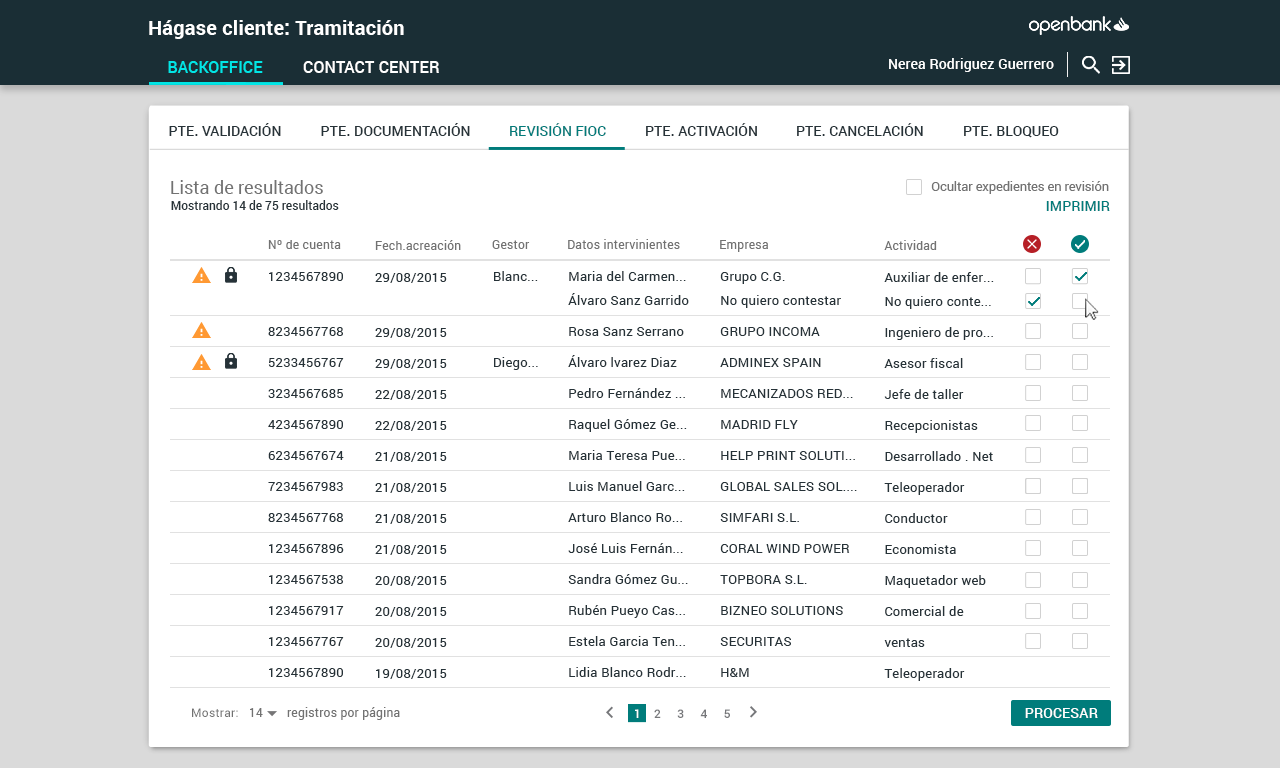
<style>
.page{position:relative;width:1280px;height:768px;background:#ffffff}
.page>*{position:absolute;margin:0}
.t1{font:20px "Roboto-Bold";letter-spacing:0.01em;color:#ffffff}
.t2{font:16px "Roboto-Medium";letter-spacing:0.01em;color:#00e6e6}
.t3{font:16px "Roboto-Medium";letter-spacing:0.01em;color:#ffffff}
.t4{font:14px "Roboto-Medium";letter-spacing:0.01em;color:#ffffff}
.t5{font:14px "Roboto-Medium";letter-spacing:0.01em;color:#263238}
.t6{font:14px "Roboto-Medium";letter-spacing:0.01em;color:#007c7b}
.t7{font:18px "Roboto-Regular";color:#727272}
.t8{font:13px "Roboto-Regular";color:#727272}
.t9{font:12px "Roboto-Medium";color:#263238}
.t10{font:14.2px "Roboto-Medium";letter-spacing:0.01em;color:#007c7b}
.t11{font:12px "Roboto-Regular";letter-spacing:0.02em;color:#727272}
.t12{font:13px/31px "Roboto-Regular";letter-spacing:0.02em;color:#263238}
.t13{font:13px/30.9px "Roboto-Regular";letter-spacing:0.02em;color:#263238}
.t14{font:13px/24px "Roboto-Regular";letter-spacing:0.02em;color:#263238}
.t15{font:13px/23.9px "Roboto-Regular";letter-spacing:0.02em;color:#263238}
.t16{font:12.1px "Roboto-Regular";letter-spacing:0.02em;color:#727272}
.t17{font:12.1px "Roboto-Medium";letter-spacing:0.02em;color:#76777a}
.t18{font:12.1px "Roboto-Medium";letter-spacing:0.02em;color:#ffffff}
</style>
<div class="page">
<p class="t1" style="left:149px;top:20px;width:255px;height:19px">Hágase cliente: Tramitación</p>
<p class="t2" style="left:168px;top:61px;width:95px;height:12px">BACKOFFICE</p>
<p class="t3" style="left:303px;top:61px;width:136px;height:12px">CONTACT CENTER</p>
<p class="t4" style="left:889px;top:58px;width:165px;height:14px">Nerea Rodriguez Guerrero</p>
<p class="t5" style="left:169px;top:123px;width:112px;height:13px">PTE. VALIDACIÓN</p>
<p class="t5" style="left:321px;top:123px;width:149px;height:13px">PTE. DOCUMENTACIÓN</p>
<p class="t6" style="left:510px;top:123px;width:96px;height:13px">REVISIÓN FIOC</p>
<p class="t5" style="left:646px;top:123px;width:111px;height:13px">PTE. ACTIVACIÓN</p>
<p class="t5" style="left:797px;top:123px;width:126px;height:13px">PTE. CANCELACIÓN</p>
<p class="t5" style="left:964px;top:126px;width:95px;height:12px">PTE. BLOQUEO</p>
<p class="t7" style="left:171px;top:180px;width:152px;height:14px">Lista de resultados</p>
<p class="t8" style="left:931px;top:181px;width:178px;height:13px">Ocultar expedientes en revisión</p>
<p class="t9" style="left:171px;top:200px;width:168px;height:10px">Mostrando 14 de 75 resultados</p>
<p class="t10" style="left:1046px;top:201px;width:64px;height:10px">IMPRIMIR</p>
<p class="t11" style="left:268px;top:240px;width:73px;height:9px">Nº de cuenta</p>
<p class="t11" style="left:375px;top:240px;width:86px;height:10px">Fech.acreación</p>
<p class="t11" style="left:492px;top:240px;width:38px;height:9px">Gestor</p>
<p class="t11" style="left:568px;top:239px;width:112px;height:10px">Datos intervinientes</p>
<p class="t11" style="left:720px;top:240px;width:48px;height:12px">Empresa</p>
<p class="t11" style="left:884px;top:240px;width:53px;height:10px">Actividad</p>
<p class="t12" style="left:268px;top:272px;width:76px;height:405px">1234567890<br><br>8234567768<br>5233456767<br>3234567685<br>4234567890<br>6234567674<br>7234567983<br>8234567768<br>1234567896<br>1234567538<br>1234567917<br>1234567767<br>1234567890</p>
<p class="t12" style="left:375px;top:273px;width:72px;height:406px"><span class="t13">29/08/2015  <br> </span><br>29/08/2015  <br>29/08/2015  <br>22/08/2015 <br>22/08/2015 <br>21/08/2015 <br>21/08/2015 <br>21/08/2015  <br>21/08/2015 <br>20/08/2015 <br>20/08/2015 <br>20/08/2015 <br>19/08/2015</p>
<p class="t14" style="left:494px;top:271px;width:44px;height:99px">Blanc...<br><br><br><span class="t12">Diego...</span></p>
<p class="t14" style="left:568px;top:271px;width:121px;height:406px">Maria del Carmen...<br>Álvaro Sanz Garrido<br><span class="t12">Rosa </span><span class="t12">Sanz Serrano<br></span><span class="t12">Álvaro </span><span class="t12">lvarez Diaz<br></span><span class="t12">Pedro </span><span class="t12">Fernández ...<br></span><span class="t12">Raquel </span><span class="t12">Gómez Ge...<br></span><span class="t12">Maria Teresa </span><span class="t12">Pue...<br></span><span class="t12">Luis Manuel </span><span class="t12">Garc...<br></span><span class="t12">Arturo </span><span class="t12">Blanco Ro...<br></span><span class="t12">José Luis </span><span class="t12">Fernán...<br></span><span class="t12">Sandra </span><span class="t12">Gómez Gu...<br></span><span class="t12">Rubén </span><span class="t12">Pueyo Cas...<br></span><span class="t12">Estela </span><span class="t12">Garcia Ten...<br></span><span class="t12">Lidia </span><span class="t12">Blanco Rodr...</span></p>
<p class="t12" style="left:720px;top:272px;width:137px;height:405px"><span class="t14">Grupo C.G.<br>No quiero contestar<br></span>GRUPO INCOMA<br>ADMINEX SPAIN<br>MECANIZADOS RED...<br>MADRID FLY<br>HELP PRINT SOLUTI...<br>GLOBAL SALES SOL....<br>SIMFARI S.L.<br>CORAL WIND POWER<br>TOPBORA S.L.<br>BIZNEO SOLUTIONS<br>SECURITAS<br>H&amp;M</p>
<p class="t12" style="left:884px;top:272px;width:110px;height:409px"><span class="t14">Auxiliar de enfer...<br></span><span class="t15">No quiero conte...<br></span>Ingeniero de pro...<br>Asesor fiscal<br>Jefe de taller<br>Recepcionistas<br>Desarrollado . Net<br>Teleoperador<br>Conductor<br>Economista<br>Maquetador web<br>Comercial de ventas<br>Teleoperador<br>Auxiliar de tienda</p>
<p class="t16" style="left:192px;top:708px;width:46px;height:9px">Mostrar:</p>
<p class="t11" style="left:250px;top:708px;width:13px;height:9px">14</p>
<p class="t16" style="left:287px;top:707px;width:113px;height:13px">registros por página</p>
<p class="t17" style="left:635px;top:709px;width:95px;height:9px"><span class="t18">1   </span> 2     3     4     5</p>
<p class="t4" style="left:1025px;top:708px;width:73px;height:10px">PROCESAR</p>
</div>
